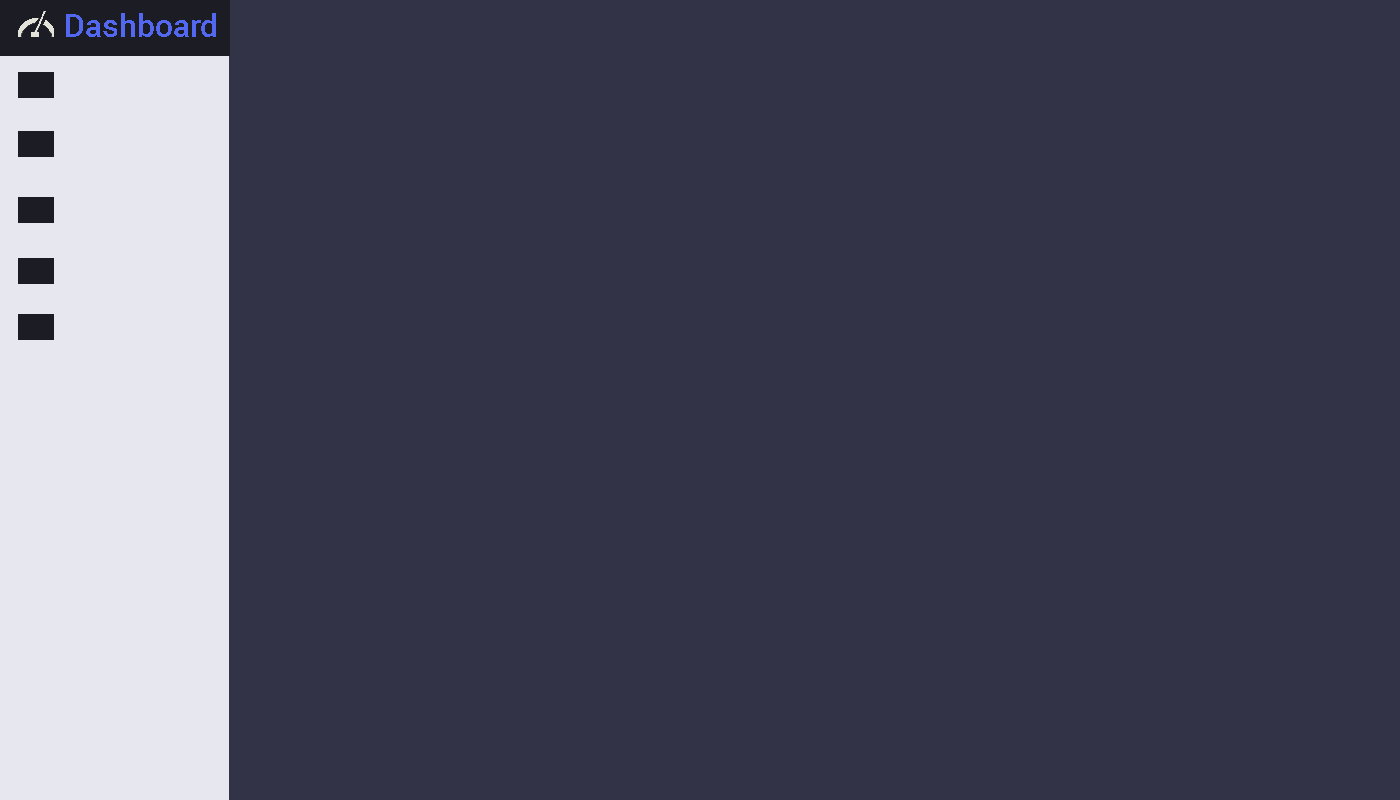
<style>
.page{position:relative;width:1400px;height:800px;background:#333347}
.page>*{position:absolute;margin:0}
.t1{font:31.8px "Roboto-Medium";color:#5268f0}
</style>
<div class="page">
<p class="t1" style="left:66px;top:13px;width:150px;height:24px">Dashboard</p>
</div>
